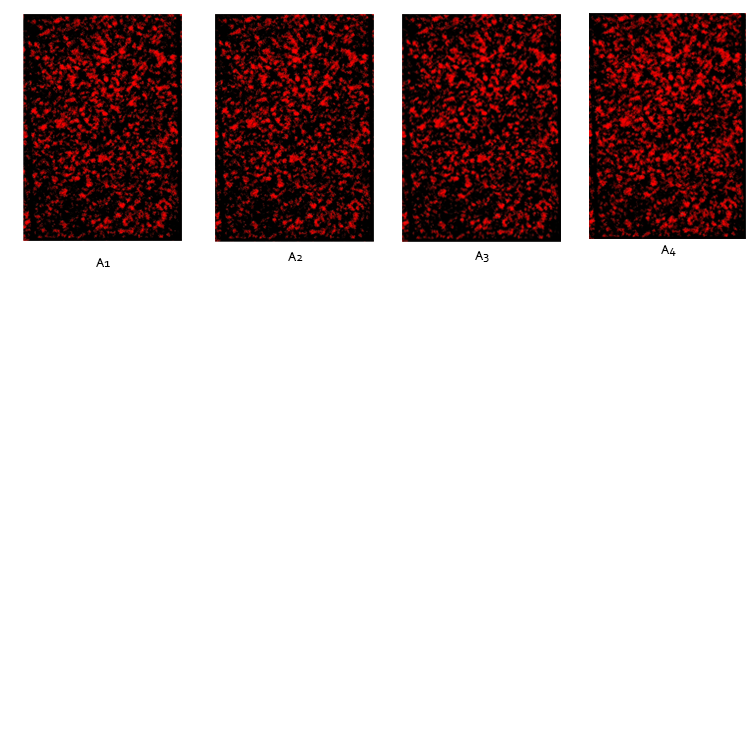
<style>
.page{position:relative;width:754px;height:730px;background:#ffffff}
.page>*{position:absolute;margin:0}
.t1{font:13px "Corbel";color:#000000}
</style>
<div class="page">
<p class="t1" style="left:661px;top:245px;width:15px;height:11px">A4</p>
<p class="t1" style="left:288px;top:252px;width:15px;height:9px">A2</p>
<p class="t1" style="left:475px;top:251px;width:14px;height:11px">A3</p>
<p class="t1" style="left:96px;top:258px;width:14px;height:9px">A1</p>
</div>
